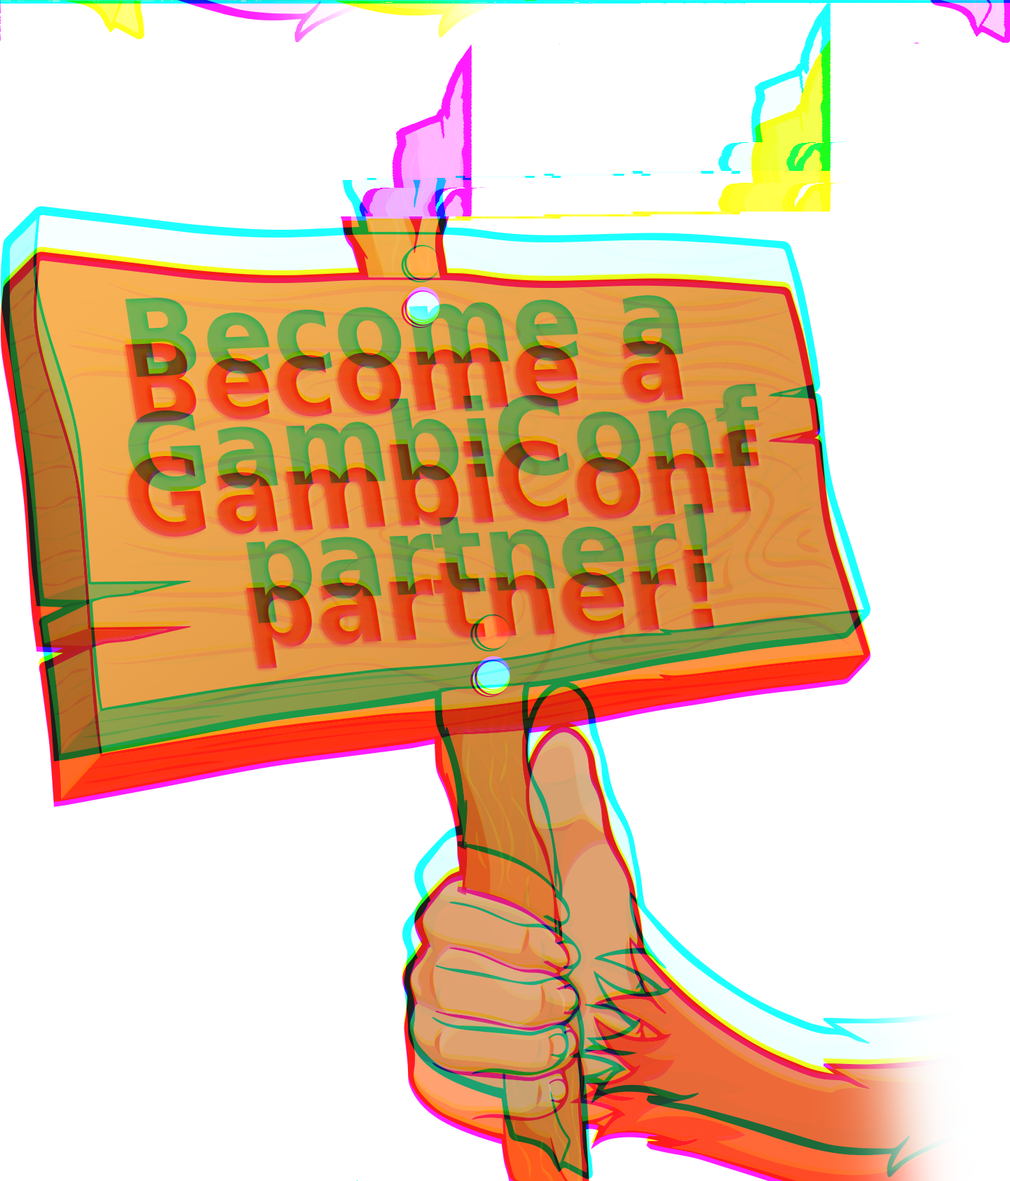
<style>
.page{position:relative;width:1010px;height:1181px;background:#ffffff}
.page>*{position:absolute;margin:0}
.t1{font:111.9px "ComicSansMS-BoldItalic";scale:0.92 1}
</style>
<div class="page">
<p class="t1" style="left:125px;top:296px;width:634px;height:329px;rotate:-2deg">Become a GambiConf partner!</p>
</div>
